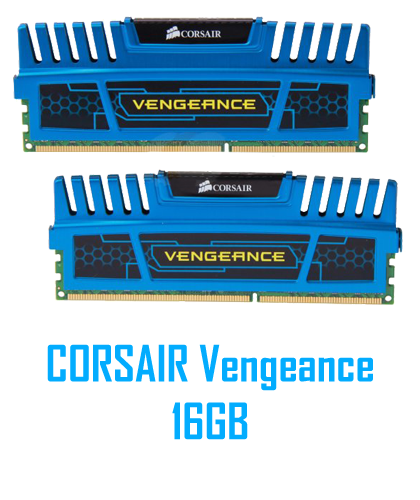
<style>
.page{position:relative;width:420px;height:500px;background:#ffffff}
.page>*{position:absolute;margin:0}
.t1{font:48px "AgencyFB-Bold";color:#02acfe}
</style>
<div class="page">
<p class="t1" style="left:47px;top:344px;width:326px;height:96px;text-align:center">CORSAIR Vengeance<br>16GB</p>
</div>
